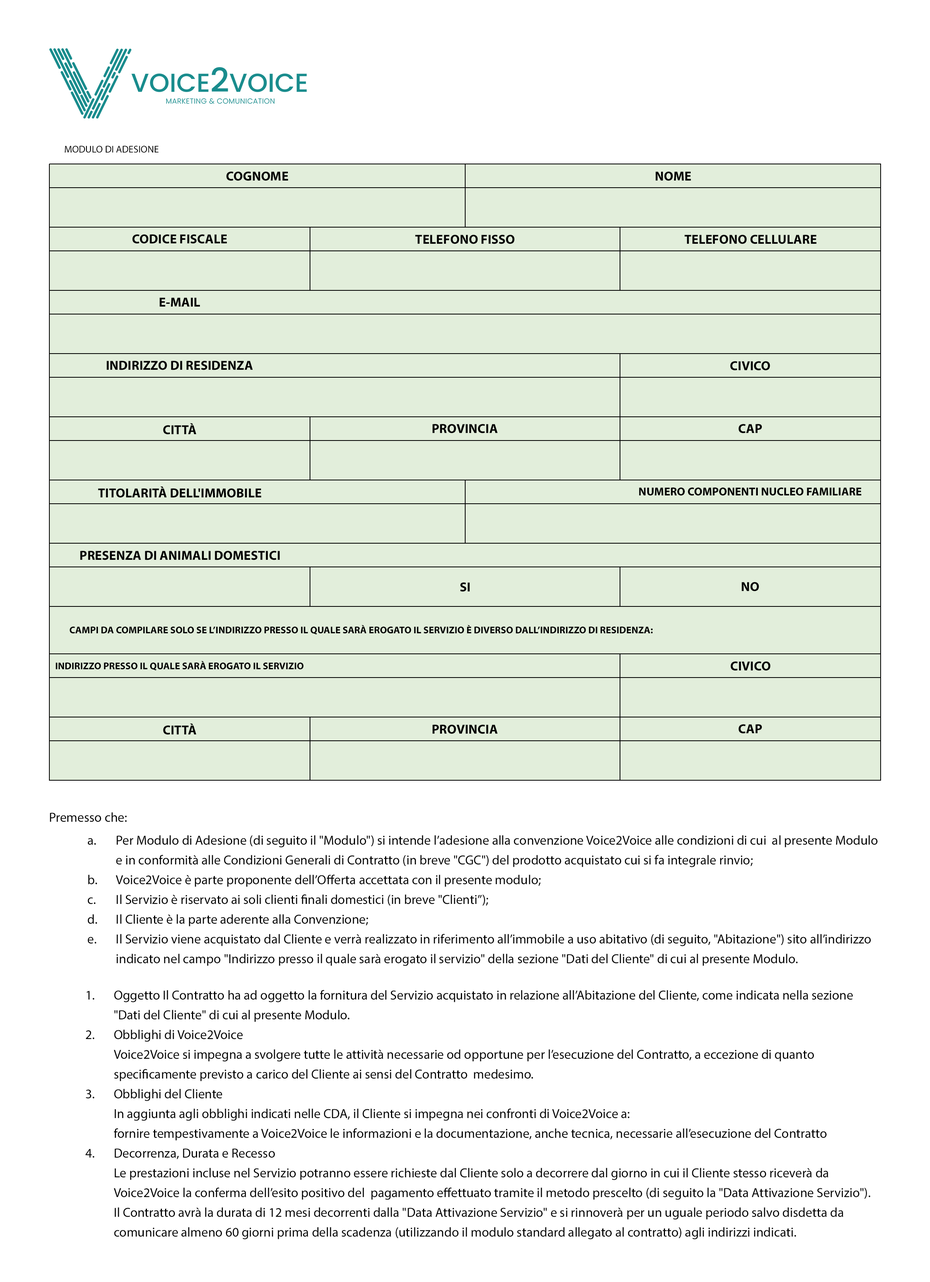
<style>
.page{position:relative;width:930px;height:1282px;background:#ffffff}
.page>*{position:absolute;margin:0}
.t1{font:9.9px "MyriadPro-Regular";color:#000000}
.t2{font:13.2px "MyriadPro-Bold";color:#000000}
.t3{font:11.5px "MyriadPro-Bold";color:#000000}
.t4{font:9.9px "MyriadPro-Bold";color:#000000}
.t5{font:13.2px "MyriadPro-Regular";color:#000000}
.t6{font:13.2px/19.8px "MyriadPro-Regular";color:#000000}
</style>
<div class="page">
<p class="t1" style="left:65px;top:146px;width:94px;height:7px">MODULO DI ADESIONE</p>
<p class="t2" style="left:226px;top:171px;width:62px;height:10px">COGNOME</p>
<p class="t2" style="left:656px;top:171px;width:35px;height:10px">NOME</p>
<p class="t2" style="left:132px;top:234px;width:95px;height:10px">CODICE FISCALE</p>
<p class="t2" style="left:415px;top:235px;width:100px;height:9px">TELEFONO FISSO</p>
<p class="t2" style="left:685px;top:235px;width:132px;height:9px">TELEFONO CELLULARE</p>
<p class="t2" style="left:160px;top:297px;width:40px;height:10px">E-MAIL</p>
<p class="t2" style="left:107px;top:361px;width:146px;height:9px">INDIRIZZO DI RESIDENZA</p>
<p class="t2" style="left:730px;top:361px;width:40px;height:10px">CIVICO</p>
<p class="t2" style="left:163px;top:423px;width:33px;height:12px">CITTÀ</p>
<p class="t2" style="left:433px;top:424px;width:65px;height:9px">PROVINCIA</p>
<p class="t2" style="left:739px;top:424px;width:23px;height:9px">CAP</p>
<p class="t2" style="left:98px;top:486px;width:164px;height:12px">TITOLARITÀ DELL'IMMOBILE</p>
<p class="t3" style="left:639px;top:487px;width:223px;height:9px">NUMERO COMPONENTI NUCLEO FAMILIARE</p>
<p class="t2" style="left:80px;top:551px;width:200px;height:9px">PRESENZA DI ANIMALI DOMESTICI</p>
<p class="t2" style="left:742px;top:582px;width:17px;height:9px">NO</p>
<p class="t2" style="left:460px;top:582px;width:10px;height:10px">SI</p>
<p class="t4" style="left:70px;top:625px;width:583px;height:9px">CAMPI DA COMPILARE SOLO SE L’INDIRIZZO PRESSO IL QUALE SARÀ EROGATO IL SERVIZIO È DIVERSO DALL’INDIRIZZO DI RESIDENZA:</p>
<p class="t4" style="left:56px;top:661px;width:248px;height:9px">INDIRIZZO PRESSO IL QUALE SARÀ EROGATO IL SERVIZIO</p>
<p class="t2" style="left:731px;top:661px;width:40px;height:10px">CIVICO</p>
<p class="t2" style="left:163px;top:723px;width:33px;height:12px">CITTÀ</p>
<p class="t2" style="left:433px;top:724px;width:65px;height:10px">PROVINCIA</p>
<p class="t2" style="left:739px;top:724px;width:23px;height:10px">CAP</p>
<p class="t5" style="left:50px;top:812px;width:77px;height:10px">Premesso che:</p>
<p class="t6" style="left:88px;top:835px;width:790px;height:131px">a.  Per Modulo di Adesione (di seguito il "Modulo") si intende l’adesione alla convenzione Voice2Voice alle condizioni di cui  al presente Modulo <br>  e in conformità alle Condizioni Generali di Contratto (in breve "CGC") del prodotto acquistato cui si fa integrale rinvio;<br>b.  Voice2Voice è parte proponente dell’Offerta accettata con il presente modulo;<br>c.  Il Servizio è riservato ai soli clienti finali domestici (in breve "Clienti”);<br>d.  Il Cliente è la parte aderente alla Convenzione;<br>e.  Il Servizio viene acquistato dal Cliente e verrà realizzato in riferimento all’immobile a uso abitativo (di seguito, "Abitazione") sito all’indirizzo <br>  indicato nel campo "Indirizzo presso il quale sarà erogato il servizio" della sezione "Dati del Cliente" di cui al presente Modulo.</p>
<p class="t6" style="left:85px;top:990px;width:786px;height:249px">1.  Oggetto Il Contratto ha ad oggetto la fornitura del Servizio acquistato in relazione all’Abitazione del Cliente, come indicata nella sezione <br>  "Dati del Cliente" di cui al presente Modulo. <br>2.  Obblighi di Voice2Voice<br>  Voice2Voice si impegna a svolgere tutte le attività necessarie od opportune per l’esecuzione del Contratto, a eccezione di quanto <br>  specificamente previsto a carico del Cliente ai sensi del Contratto  medesimo.<br>3.  Obblighi del Cliente<br>  In aggiunta agli obblighi indicati nelle CDA, il Cliente si impegna nei confronti di Voice2Voice a:<br>  fornire tempestivamente a Voice2Voice le informazioni e la documentazione, anche tecnica, necessarie all’esecuzione del Contratto<br>4.  Decorrenza, Durata e Recesso<br>  Le prestazioni incluse nel Servizio potranno essere richieste dal Cliente solo a decorrere dal giorno in cui il Cliente stesso riceverà da <br>  Voice2Voice la conferma dell’esito positivo del  pagamento effettuato tramite il metodo prescelto (di seguito la "Data Attivazione Servizio").<br>  Il Contratto avrà la durata di 12 mesi decorrenti dalla "Data Attivazione Servizio" e si rinnoverà per un uguale periodo salvo disdetta da <br>  comunicare almeno 60 giorni prima della scadenza (utilizzando il modulo standard allegato al contratto) agli indirizzi indicati.</p>
</div>
